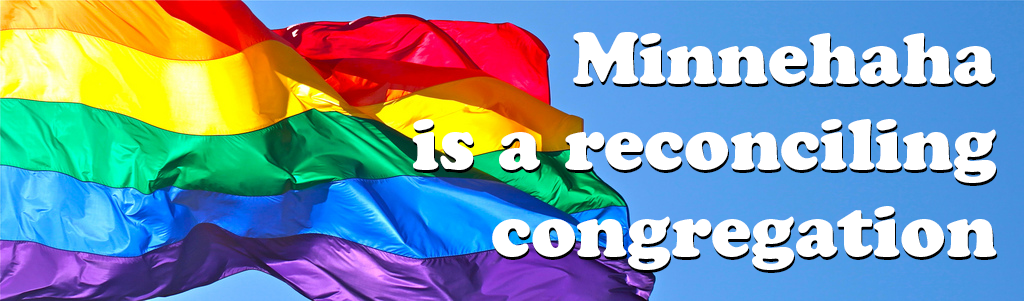
<style>
.page{position:relative;width:1024px;height:301px}
.page>*{position:absolute;margin:0}
.t1{font:72px "CooperBlackStd";color:#ffffff}
</style>
<div class="page">
<p class="t1" style="left:412px;top:32px;width:585px;height:238px;text-align:right">Minnehaha<br>is a reconciling<br>congregation</p>
<p class="t1" style="left:413px;top:35px;width:585px;height:238px;text-align:right">Minnehaha<br>is a reconciling<br>congregation</p>
</div>
